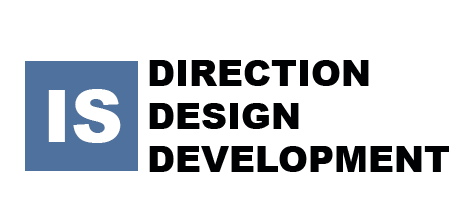
<style>
.page{position:relative;width:469px;height:220px;background:#ffffff}
.page>*{position:absolute;margin:0}
.t1{font:36px "Arial-Black";color:#000103}
.t2{font:72px "Arial-Black";color:#ffffff}
</style>
<div class="page">
<p class="t1" style="left:149px;top:60px;width:300px;height:112px">DIRECTION<br>DESIGN<br>DEVELOPMENT</p>
<p class="t2" style="left:48px;top:89px;width:73px;height:54px">IS</p>
</div>
